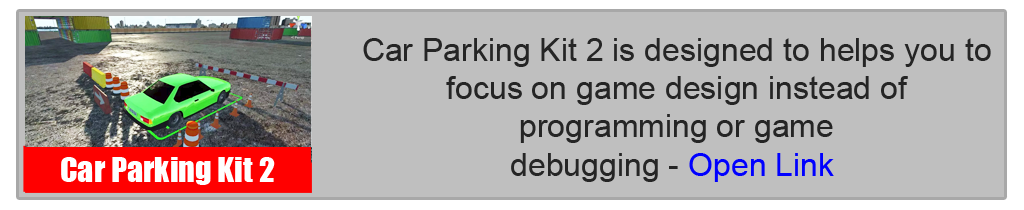
<style>
.page{position:relative;width:1024px;height:210px;background:#bfbfbf}
.page>*{position:absolute;margin:0}
.t1{font:32px "ArialMT";color:#252525}
.t2{font:32px "ArialMT";color:#0000ff}
.t3{font:32px "Impact";color:#ffffff}
</style>
<div class="page">
<p class="t1" style="left:363px;top:38px;width:628px;height:144px;text-align:center">Car Parking Kit 2 is designed to helps you to <br>focus on game design instead of <br>programming or game <br>debugging - <span class="t2">Open Link</span></p>
<p class="t3" style="left:61px;top:157px;width:214px;height:28px">Car Parking Kit 2</p>
</div>
